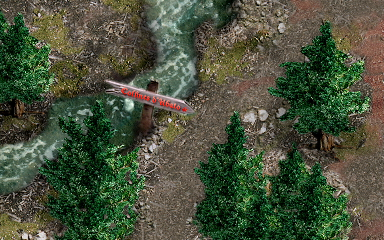
<style>
.page{position:relative;width:384px;height:240px}
.page>*{position:absolute;margin:0}
.t1{font:8.5px "DucDeBerry";letter-spacing:0.04em;font-style:italic;scale:1.03 1}
</style>
<div class="page">
<p class="t1" style="left:121px;top:87px;width:60px;height:23px;rotate:16deg">Collines d'Ubato</p>
<p class="t1" style="left:122px;top:87px;width:59px;height:23px;rotate:16deg">Collines d'Ubato</p>
</div>
